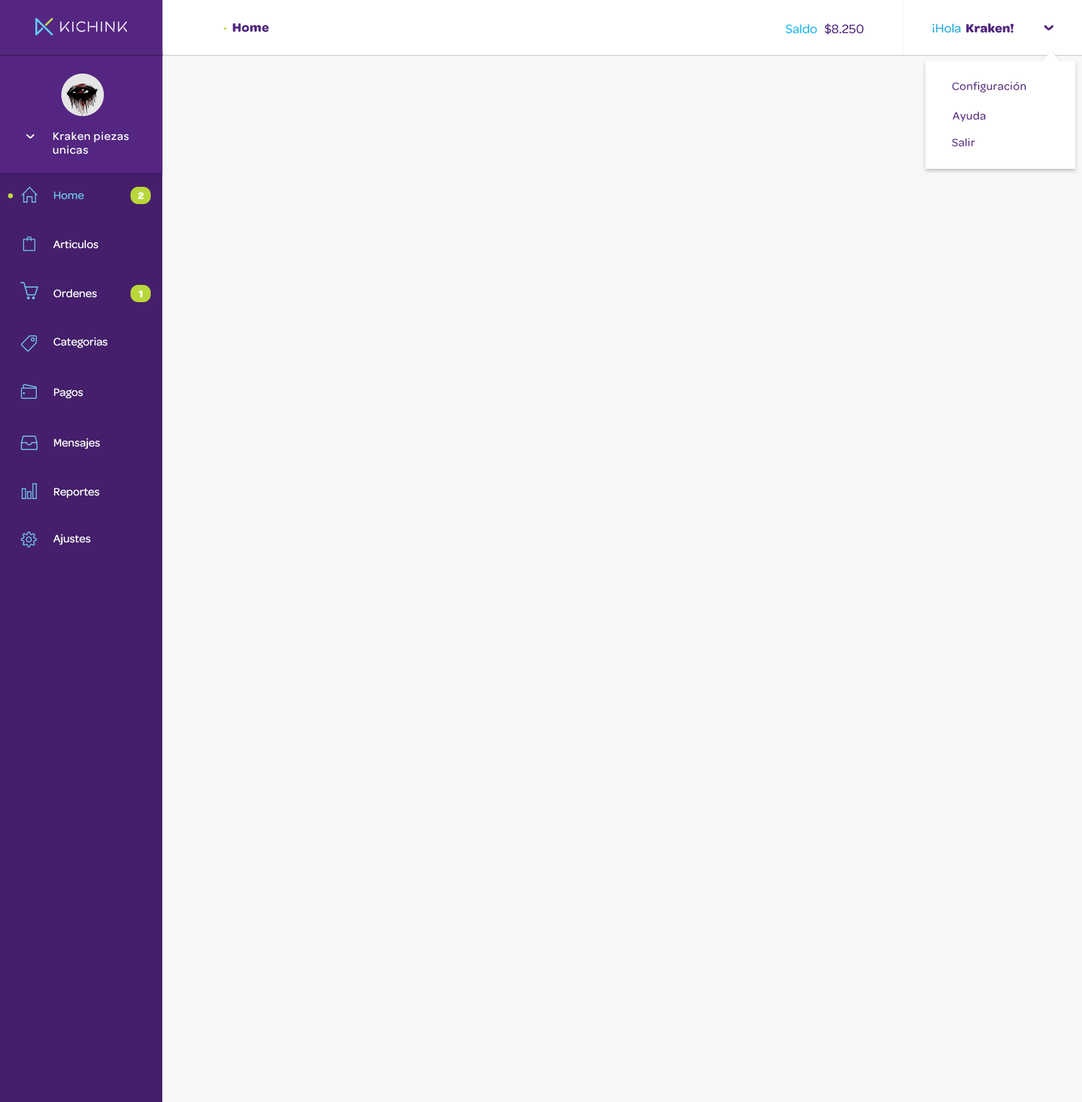
<style>
.page{position:relative;width:1082px;height:1102px;background:#f7f7f7}
.page>*{position:absolute;margin:0}
.t1{font:13px "Omnes-Bold";letter-spacing:0.025em;color:#542682}
.t2{font:13px "Omnes-Bold";letter-spacing:0.025em;color:#bad739}
.t3{font:13px "Omnes-Medium";color:#19bbea}
.t4{font:13px "Omnes-Medium";color:#542682}
.t5{font:13px "Omnes-Bold";color:#542682}
.t6{font:13px "Omnes-Medium";color:#1eadde}
.t7{font:11.5px "Omnes-Medium";letter-spacing:0.025em;color:#542682}
.t8{font:11.5px "Omnes-Medium";letter-spacing:0.05em;color:#ffffff}
.t9{font:11.5px "Omnes-Medium";color:#71c5e8}
.t10{font:10.1px "Omnes-Bold";color:#ffffff}
.t11{font:11.5px "Omnes-Medium";color:#ffffff}
</style>
<div class="page">
<p class="t1" style="left:224px;top:23px;width:45px;height:9px"><span class="t2">·  </span>Home</p>
<p class="t3" style="left:785px;top:24px;width:32px;height:10px">Saldo</p>
<p class="t4" style="left:824px;top:23px;width:39px;height:12px">$8.250</p>
<p class="t5" style="left:933px;top:23px;width:80px;height:10px"><span class="t6">¡Hola  </span>Kraken!</p>
<p class="t7" style="left:952px;top:82px;width:74px;height:10px">Configuración</p>
<p class="t7" style="left:952px;top:111px;width:33px;height:11px">Ayuda</p>
<p class="t8" style="left:53px;top:131px;width:76px;height:23px">Kraken piezas<br>unicas</p>
<p class="t7" style="left:952px;top:138px;width:23px;height:8px">Salir</p>
<p class="t9" style="left:54px;top:191px;width:30px;height:9px">Home</p>
<p class="t10" style="left:138px;top:192px;width:6px;height:7px">2</p>
<p class="t11" style="left:53px;top:239px;width:45px;height:10px">Articulos</p>
<p class="t11" style="left:53px;top:289px;width:44px;height:9px">Ordenes</p>
<p class="t10" style="left:138px;top:290px;width:5px;height:8px">1</p>
<p class="t11" style="left:53px;top:337px;width:54px;height:11px">Categorias</p>
<p class="t11" style="left:54px;top:388px;width:29px;height:11px">Pagos</p>
<p class="t11" style="left:54px;top:438px;width:46px;height:11px">Mensajes</p>
<p class="t11" style="left:54px;top:488px;width:46px;height:10px">Reportes</p>
<p class="t11" style="left:53px;top:534px;width:38px;height:11px">Ajustes</p>
</div>
